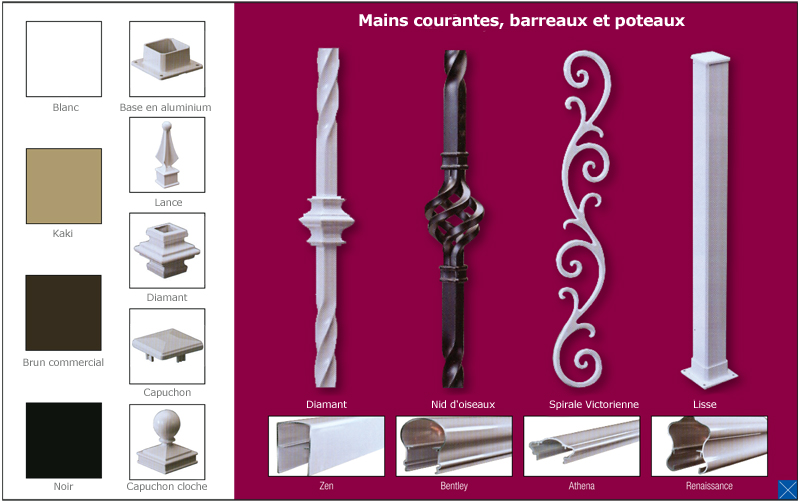
<style>
.page{position:relative;width:800px;height:502px;background:#8d0044}
.page>*{position:absolute;margin:0}
.t1{font:16px "Verdana-Bold";letter-spacing:-0.025em;color:#ffffff}
.t2{font:10px "Verdana";letter-spacing:-0.025em;color:#767877}
.t3{font:10px "Verdana";letter-spacing:-0.025em;color:#ffffff}
</style>
<div class="page">
<p class="t1" style="left:359px;top:13px;width:326px;height:17px">Mains courantes, barreaux et poteaux</p>
<p class="t2" style="left:53px;top:103px;width:26px;height:8px">Blanc</p>
<p class="t2" style="left:120px;top:103px;width:91px;height:8px">Base en aluminium</p>
<p class="t2" style="left:155px;top:198px;width:27px;height:8px">Lance</p>
<p class="t2" style="left:53px;top:229px;width:20px;height:8px">Kaki</p>
<p class="t2" style="left:147px;top:293px;width:41px;height:8px">Diamant</p>
<p class="t2" style="left:23px;top:358px;width:81px;height:8px">Brun commercial</p>
<p class="t2" style="left:144px;top:388px;width:47px;height:10px">Capuchon</p>
<p class="t3" style="left:307px;top:400px;width:40px;height:8px">Diamant</p>
<p class="t3" style="left:432px;top:400px;width:63px;height:8px">Nid d'oiseaux</p>
<p class="t3" style="left:549px;top:400px;width:90px;height:10px">Spirale Victorienne</p>
<p class="t3" style="left:694px;top:400px;width:23px;height:8px">Lisse</p>
<p class="t2" style="left:54px;top:482px;width:20px;height:8px">Noir</p>
<p class="t2" style="left:127px;top:482px;width:80px;height:10px">Capuchon cloche</p>
</div>
